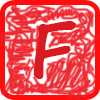
<style>
.page{position:relative;width:100px;height:100px}
.page>*{position:absolute;margin:0}
.t1{font:75px "SegoeScript-Bold";color:#d91a20}
</style>
<div class="page">
<p class="t1" style="left:33px;top:21px;width:43px;height:58px">F</p>
</div>
